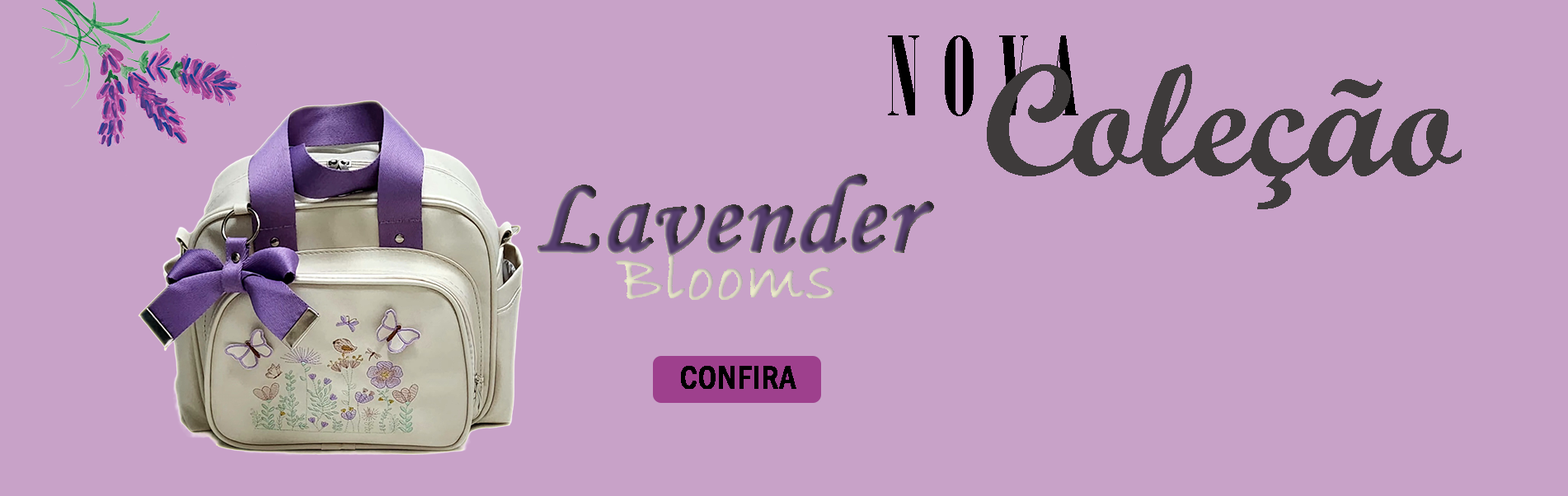
<style>
.page{position:relative;width:1568px;height:496px;background:#c8a2c8}
.page>*{position:absolute;margin:0}
.t1{font:108.8px "Onyx";letter-spacing:0.2em;color:#000000}
.t2{font:158.3px "ScriptMTBold";color:#3e3b3b}
.t3{font:108.8px "MonotypeCorsiva";font-weight:bold}
.t4{font:67.6px "BradleyHandITC";color:#d5d0be;font-weight:bold}
.t5{font:33px "FranklinGothic-MediumCond";color:#000000;font-weight:bold}
</style>
<div class="page">
<p class="t1" style="left:888px;top:35px;width:190px;height:81px">NOVA</p>
<p class="t2" style="left:987px;top:64px;width:475px;height:145px">Coleção</p>
<p class="t3" style="left:538px;top:174px;width:396px;height:82px">Lavender</p>
<p class="t4" style="left:616px;top:255px;width:218px;height:45px">Blooms</p>
<p class="t5" style="left:681px;top:366px;width:115px;height:23px">CONFIRA</p>
</div>
